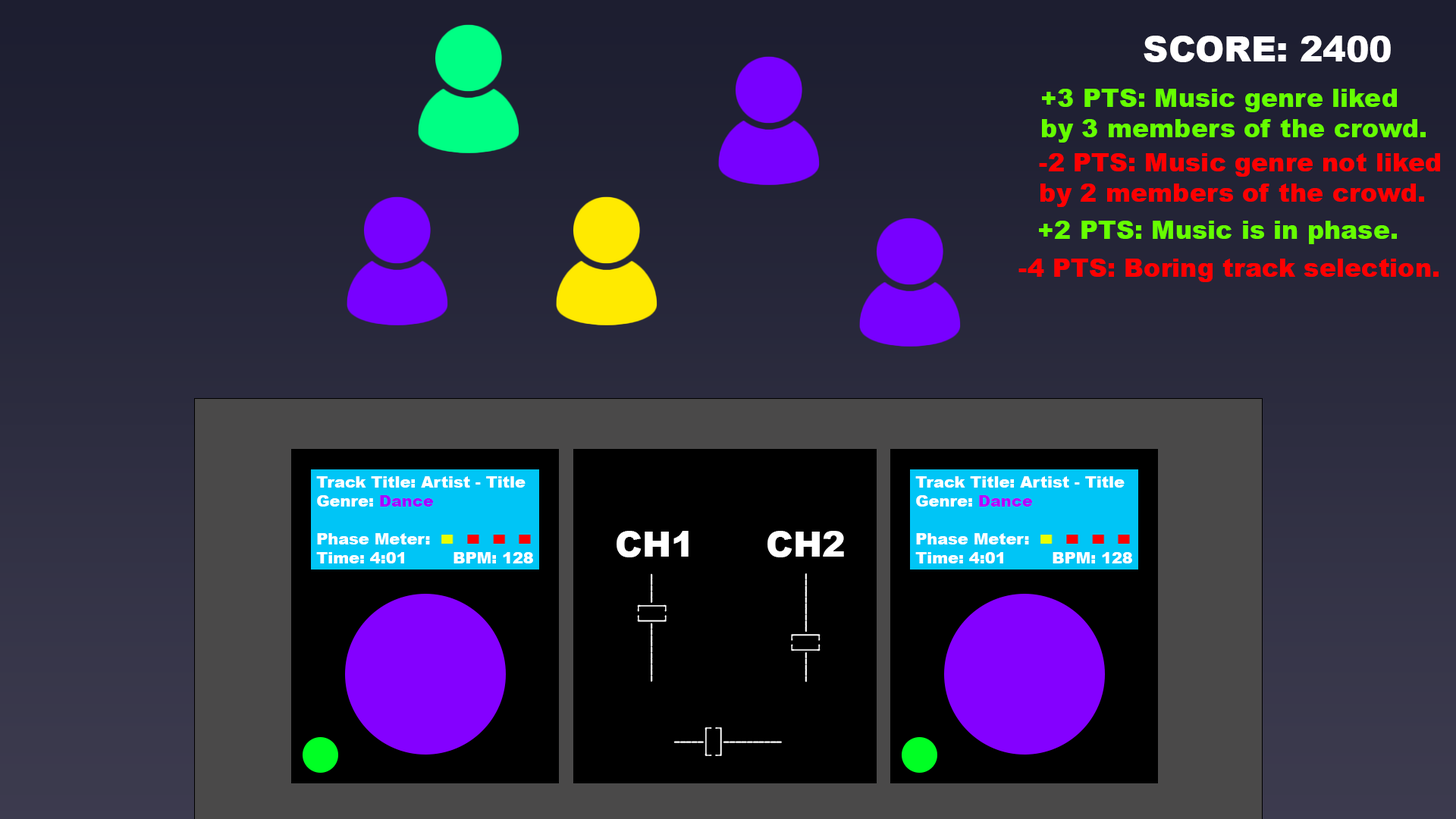
<style>
.page{position:relative;width:1456px;height:819px}
.page>*{position:absolute;margin:0}
.t1{font:34.8px "Arial-Black";color:#ffffff}
.t2{font:25.3px "Arial-Black";color:#66ff00}
.t3{font:25.3px "Arial-Black";color:#ff0000}
.t4{font:15.8px "Arial-Black";color:#ffffff}
.t5{font:15.8px "Arial-Black";color:#a800ff}
.t6{font:15.8px "Arial-Black";color:#b700fb}
.t7{font:34.8px "AmericanTypewriter-CondensedLight";color:#ffffff}
</style>
<div class="page">
<p class="t1" style="left:1144px;top:36px;width:247px;height:26px">SCORE: 2400</p>
<p class="t2" style="left:1042px;top:89px;width:384px;height:54px">+3 PTS: Music genre liked<br>by 3 members of the crowd.</p>
<p class="t3" style="left:1039px;top:153px;width:401px;height:54px">-2 PTS: Music genre not liked<br>by 2 members of the crowd.</p>
<p class="t2" style="left:1039px;top:221px;width:358px;height:23px">+2 PTS: Music is in phase.</p>
<p class="t3" style="left:1018px;top:259px;width:421px;height:23px">-4 PTS: Boring track selection.</p>
<p class="t4" style="left:316px;top:476px;width:217px;height:87px">Track Title: Artist - Title<br>Genre: <span class="t5">Dance<br></span><br>Phase Meter:<br>Time: 4:01  BPM: 128</p>
<p class="t4" style="left:915px;top:476px;width:217px;height:87px">Track Title: Artist - Title<br>Genre: <span class="t6">Dance<br></span><br>Phase Meter:<br>Time: 4:01  BPM: 128</p>
<p class="t1" style="left:617px;top:531px;width:72px;height:26px">CH1</p>
<p class="t1" style="left:767px;top:531px;width:77px;height:26px">CH2</p>
<p class="t7" style="left:637px;top:573px;width:30px;height:109px;rotate:90deg">-----[]----------</p>
<p class="t7" style="left:791px;top:573px;width:30px;height:109px;rotate:-90deg">-----[]----------</p>
<p class="t7" style="left:673px;top:727px;width:109px;height:29px">-----[]----------</p>
</div>
